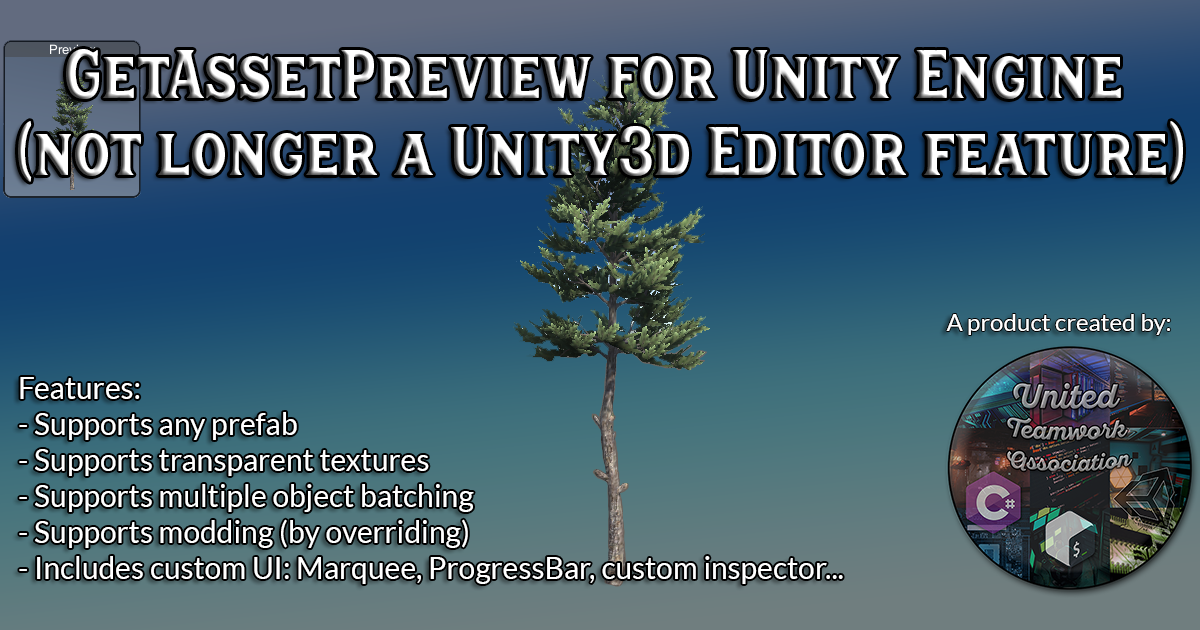
<style>
.page{position:relative;width:1200px;height:630px}
.page>*{position:absolute;margin:0}
.t1{font:64px "HanleyPro-Block"}
.t2{font:24px "Lato-Regular";color:#ffffff}
.t3{font:30px "Lato-Regular";color:#ffffff}
</style>
<div class="page">
<p class="t1" style="left:18px;top:49px;width:1165px;height:133px;text-align:center">GetAssetPreview for Unity Engine <br>(not longer a Unity3d Editor feature)</p>
<p class="t2" style="left:946px;top:314px;width:225px;height:21px">A product created by:</p>
<p class="t3" style="left:19px;top:377px;width:824px;height:207px">Features:<br>- Supports any prefab<br>- Supports transparent textures<br>- Supports multiple object batching<br>- Supports modding (by overriding)<br>- Includes custom UI: Marquee, ProgressBar, custom inspector...</p>
</div>
